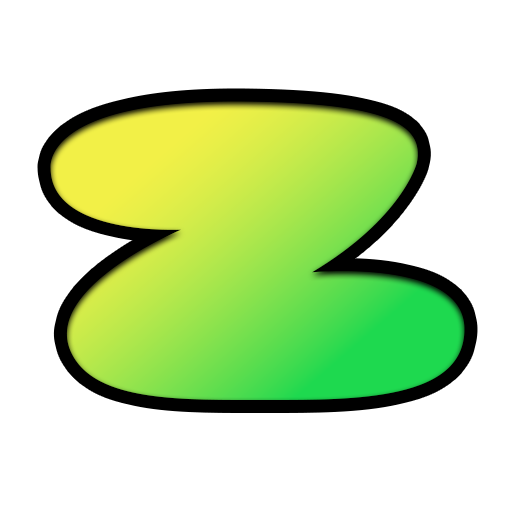
<style>
.page{position:relative;width:512px;height:512px;background:#ffffff}
.page>*{position:absolute;margin:0}
.t1{font:414.5px "Sniglet-ExtraBold";scale:1.52 1}
</style>
<div class="page">
<p class="t1" style="left:50px;top:101px;width:415px;height:299px">Z</p>
</div>
